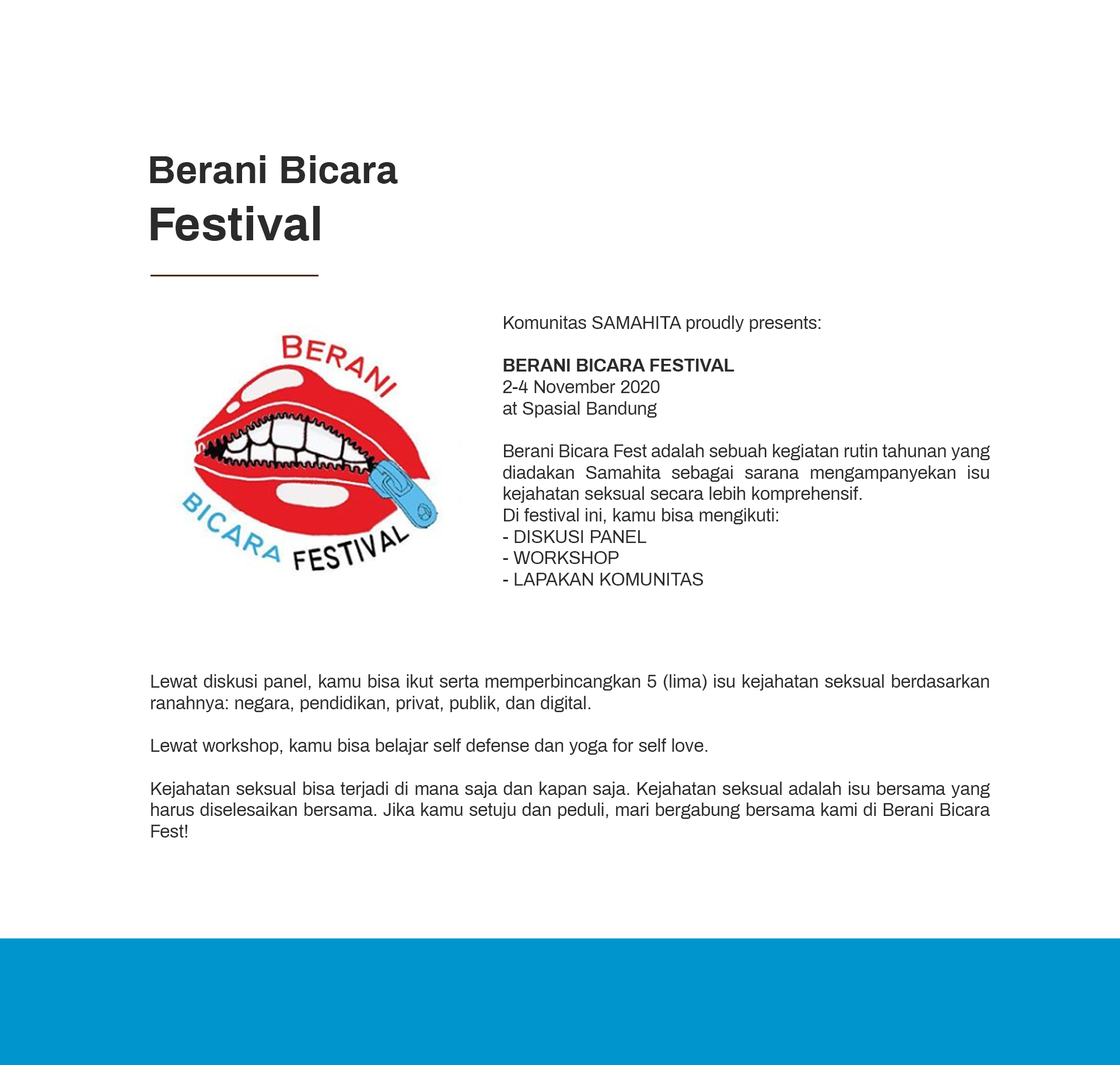
<style>
.page{position:relative;width:1120px;height:1065px;background:#ffffff}
.page>*{position:absolute;margin:0}
.t1{font:38.9px "Archivo-Bold";color:#2b2b2b}
.t2{font:47.8px "Archivo-Bold";color:#2b2b2b}
.t3{font:17.8px "Archivo-Regular";color:#2b2b2b}
.t4{font:17.8px "Archivo-Bold";color:#2b2b2b}
</style>
<div class="page">
<p class="t1" style="left:150px;top:155px;width:248px;height:86px">Berani Bicara<br><span class="t2">Festival</span></p>
<p class="t3" style="left:503px;top:316px;width:487px;height:270px;text-align:justify">Komunitas SAMAHITA proudly presents:<br><span class="t4"><br>BERANI BICARA FESTIVAL<br></span>2-4 November 2020<br>at Spasial Bandung<br><br>Berani Bicara Fest adalah sebuah kegiatan rutin tahunan yang diadakan Samahita sebagai sarana mengampanyekan isu kejahatan seksual secara lebih komprehensif.<br>Di festival ini, kamu bisa mengikuti:<br>- DISKUSI PANEL<br>- WORKSHOP<br>- LAPAKAN KOMUNITAS</p>
<p class="t3" style="left:151px;top:674px;width:839px;height:163px;text-align:justify">Lewat diskusi panel, kamu bisa ikut serta memperbincangkan 5 (lima) isu kejahatan seksual berdasarkan ranahnya: negara, pendidikan, privat, publik, dan digital.<br><br>Lewat workshop, kamu bisa belajar self defense dan yoga for self love.<br><br>Kejahatan seksual bisa terjadi di mana saja dan kapan saja. Kejahatan seksual adalah isu bersama yang harus diselesaikan bersama. Jika kamu setuju dan peduli, mari bergabung bersama kami di Berani Bicara Fest!</p>
</div>
